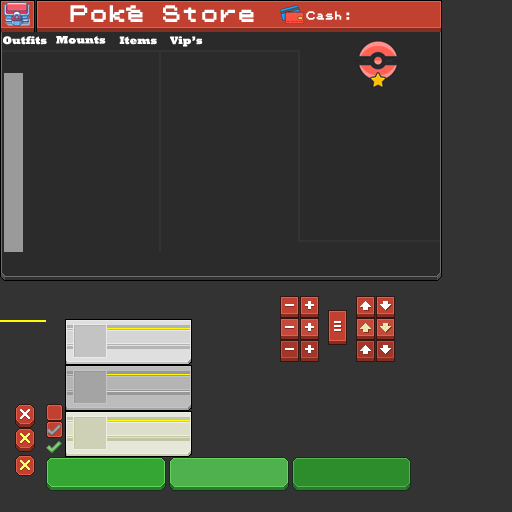
<style>
.page{position:relative;width:512px;height:512px;background:#333333}
.page>*{position:absolute;margin:0}
.t1{font:9px "PokemonGB";color:#ffffff;font-weight:bold}
.t2{font:11px "Rockwell-ExtraBold";color:#ffffff}
</style>
<div class="page">
<p class="t1" style="left:306px;top:11px;width:44px;height:9px">Cash:</p>
<p class="t2" style="left:3px;top:36px;width:44px;height:9px">Outfits</p>
<p class="t2" style="left:56px;top:36px;width:50px;height:8px">Mounts</p>
<p class="t2" style="left:119px;top:36px;width:38px;height:9px">Items</p>
<p class="t2" style="left:170px;top:36px;width:33px;height:11px">Vip’s</p>
</div>
